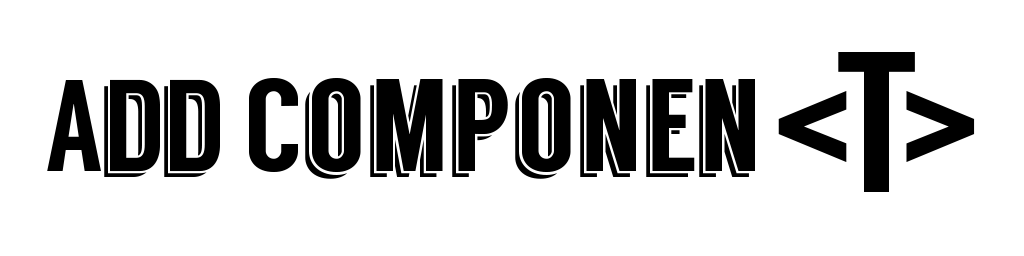
<style>
.page{position:relative;width:1024px;height:256px;background:#ffffff}
.page>*{position:absolute;margin:0}
.t1{font:200.1px "Langdon";color:#000000}
.t2{font:132px "Langdon";color:#000000}
.t3{font:130px "Langdon";letter-spacing:-0.04em;color:#000000}
.t4{font:144.1px "Impact";color:#000000}
</style>
<div class="page">
<p class="t1" style="left:838px;top:52px;width:77px;height:140px">T</p>
<p class="t2" style="left:47px;top:78px;width:708px;height:101px"><span class="t3">Add </span>Componen</p>
<p class="t4" style="left:778px;top:91px;width:197px;height:71px">&lt;  &gt;</p>
</div>
